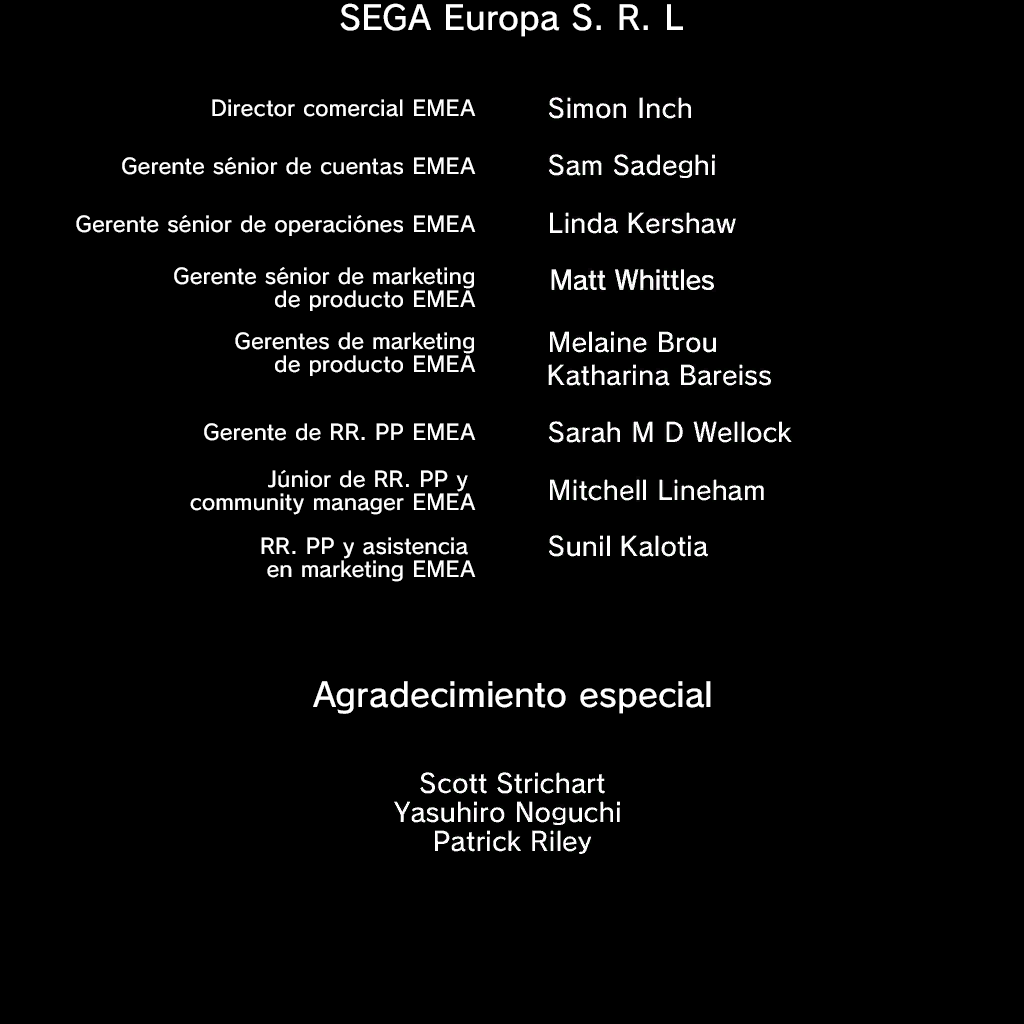
<style>
.page{position:relative;width:1024px;height:1024px;background:#000000}
.page>*{position:absolute;margin:0}
.t1{font:32.9px "SCEPS3RodinLATIN-Regular";letter-spacing:0.015em;color:#ffffff}
.t2{font:21px "SCEPS3RodinLATIN-Regular";letter-spacing:0.015em;color:#ffffff}
.t3{font:21px/23px "SCEPS3RodinLATIN-Regular";letter-spacing:0.015em;color:#ffffff}
</style>
<div class="page">
<p class="t1" style="left:340px;top:3px;width:343px;height:34px">SEGA Europa S. R. L</p>
<p class="t2" style="left:212px;top:99px;width:264px;height:18px">Director comercial EMEA</p>
<p class="t2" style="left:122px;top:157px;width:354px;height:18px">Gerente sénior de cuentas EMEA</p>
<p class="t2" style="left:76px;top:215px;width:400px;height:21px">Gerente sénior de operaciónes EMEA</p>
<p class="t3" style="left:174px;top:267px;width:302px;height:44px;text-align:right">Gerente sénior de marketing<br>de producto EMEA</p>
<p class="t3" style="left:235px;top:332px;width:241px;height:44px;text-align:right">Gerentes de marketing<br>de producto EMEA</p>
<p class="t2" style="left:204px;top:423px;width:272px;height:18px">Gerente de RR. PP EMEA</p>
<p class="t3" style="left:190px;top:470px;width:286px;height:45px;text-align:right">Júnior de RR. PP y <br>community manager EMEA</p>
<p class="t3" style="left:261px;top:537px;width:215px;height:45px;text-align:right">RR. PP y asistencia <br>en marketing EMEA</p>
<p class="t1" style="left:313px;top:681px;width:398px;height:33px">Agradecimiento especial</p>
</div>
